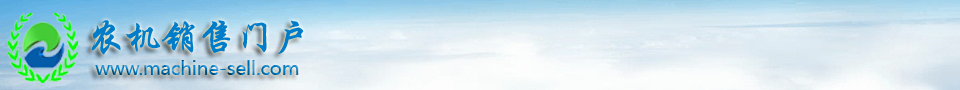
<style>
.page{position:relative;width:960px;height:90px}
.page>*{position:absolute;margin:0}
.t1{font:37.3px "STXingkai";color:#017cc8}
.t2{font:18.7px "MicrosoftYaHei"}
</style>
<div class="page">
<p class="t1" style="left:91px;top:20px;width:213px;height:35px">农机销售门户</p>
<p class="t2" style="left:95px;top:60px;width:204px;height:15px">www.machine-sell.com</p>
</div>
